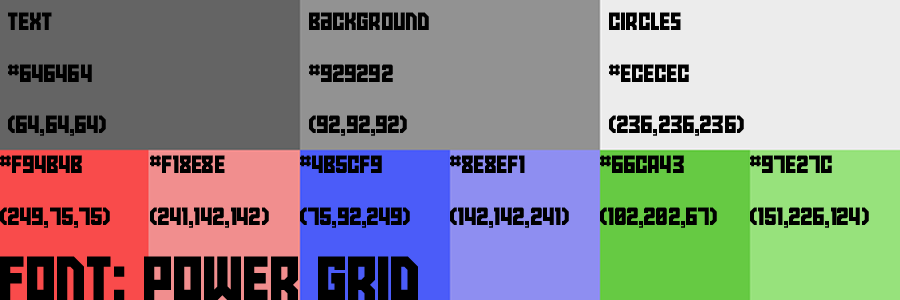
<style>
.page{position:relative;width:900px;height:300px}
.page>*{position:absolute;margin:0}
.t1{font:43px "Power-Grid";color:#000000}
.t2{font:107px "Power-Grid";color:#000000}
</style>
<div class="page">
<p class="t1" style="left:8px;top:12px;width:98px;height:124px">Text<br>#646464<br>(64,64,64)</p>
<p class="t1" style="left:309px;top:12px;width:120px;height:124px">Background<br>#929292<br>(92,92,92)</p>
<p class="t1" style="left:609px;top:12px;width:135px;height:124px">Circles<br>#ececec<br>(236,236,236)</p>
<p class="t1" style="left:0px;top:155px;width:110px;height:73px">#f94b4b<br>(249,75,75)</p>
<p class="t1" style="left:150px;top:155px;width:119px;height:73px">#f18e8e<br>(241,142,142)</p>
<p class="t1" style="left:300px;top:155px;width:110px;height:73px">#4b5cf9<br>(75,92,249)</p>
<p class="t1" style="left:450px;top:155px;width:119px;height:73px">#8e8ef1<br>(142,142,241)</p>
<p class="t1" style="left:600px;top:155px;width:117px;height:73px">#66cA43<br>(102,202,67)</p>
<p class="t1" style="left:750px;top:155px;width:119px;height:73px">#97e27c<br>(151,226,124)</p>
<p class="t2" style="left:0px;top:256px;width:418px;height:44px">Font: Power Grid</p>
</div>
